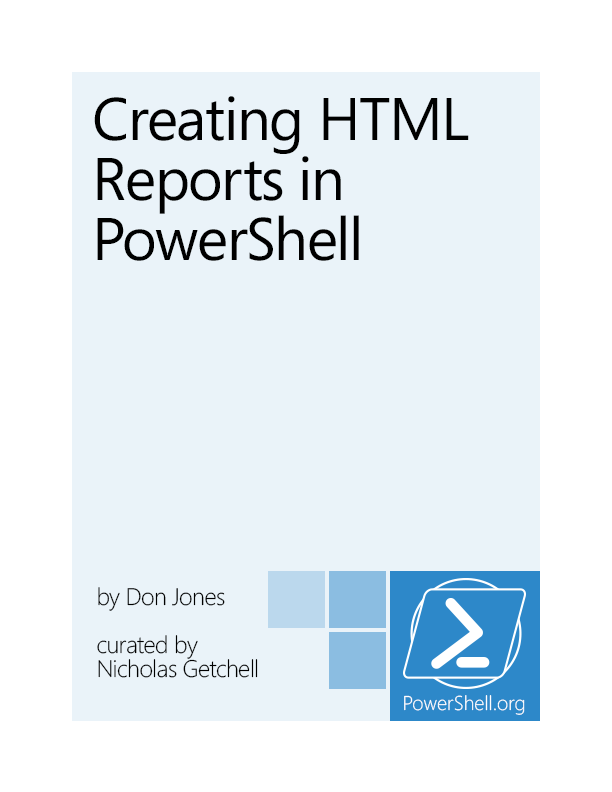
<style>
.page{position:relative;width:612px;height:792px;background:#eaf3f9}
.page>*{position:absolute;margin:0}
.t1{font:60px/60px "Segoe";letter-spacing:-0.025em;color:#000000}
.t2{font:24px/24px "Segoe-Light";letter-spacing:-0.025em;color:#000000}
</style>
<div class="page">
<p class="t1" style="left:94px;top:96px;width:375px;height:165px">Creating HTML<br>Reports in<br>PowerShell</p>
<p class="t2" style="left:97px;top:587px;width:161px;height:91px">by Don Jones<br><br>curated by<br>Nicholas Getchell</p>
</div>
